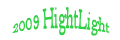
<style>
.page{position:relative;width:120px;height:40px;background:#ffffff}
.page>*{position:absolute;margin:0}
.t1{font:14px "BellMT";color:#32cf44}
</style>
<div class="page">
<p class="t1" style="left:12px;top:7px;width:98px;height:29px">2009 HightLight</p>
</div>
